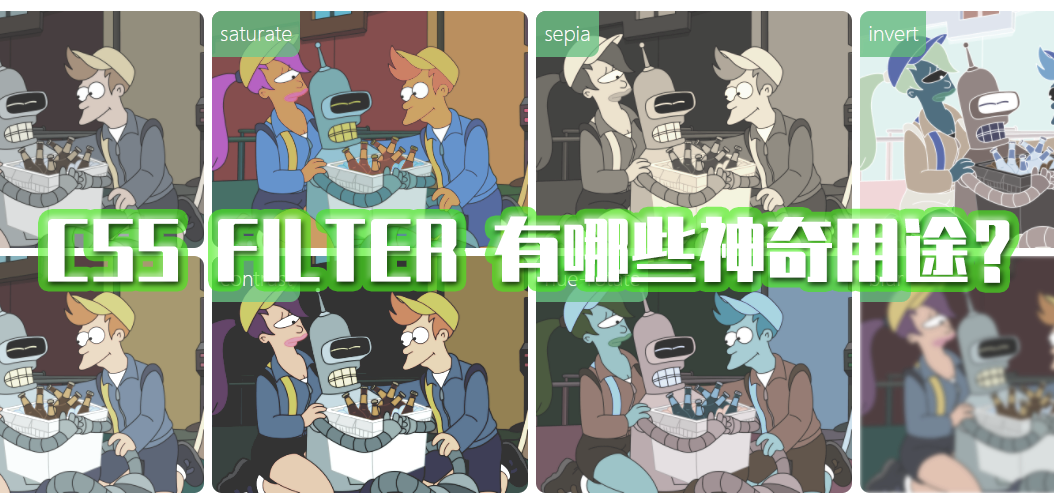
<style>
.page{position:relative;width:1054px;height:504px}
.page>*{position:absolute;margin:0}
.t1{font:68px "ZhenyanGB-Regular";color:#ffffff}
</style>
<div class="page">
<p class="t1" style="left:48px;top:216px;width:962px;height:67px">CSS FILTER 有哪些神奇用途？</p>
</div>
